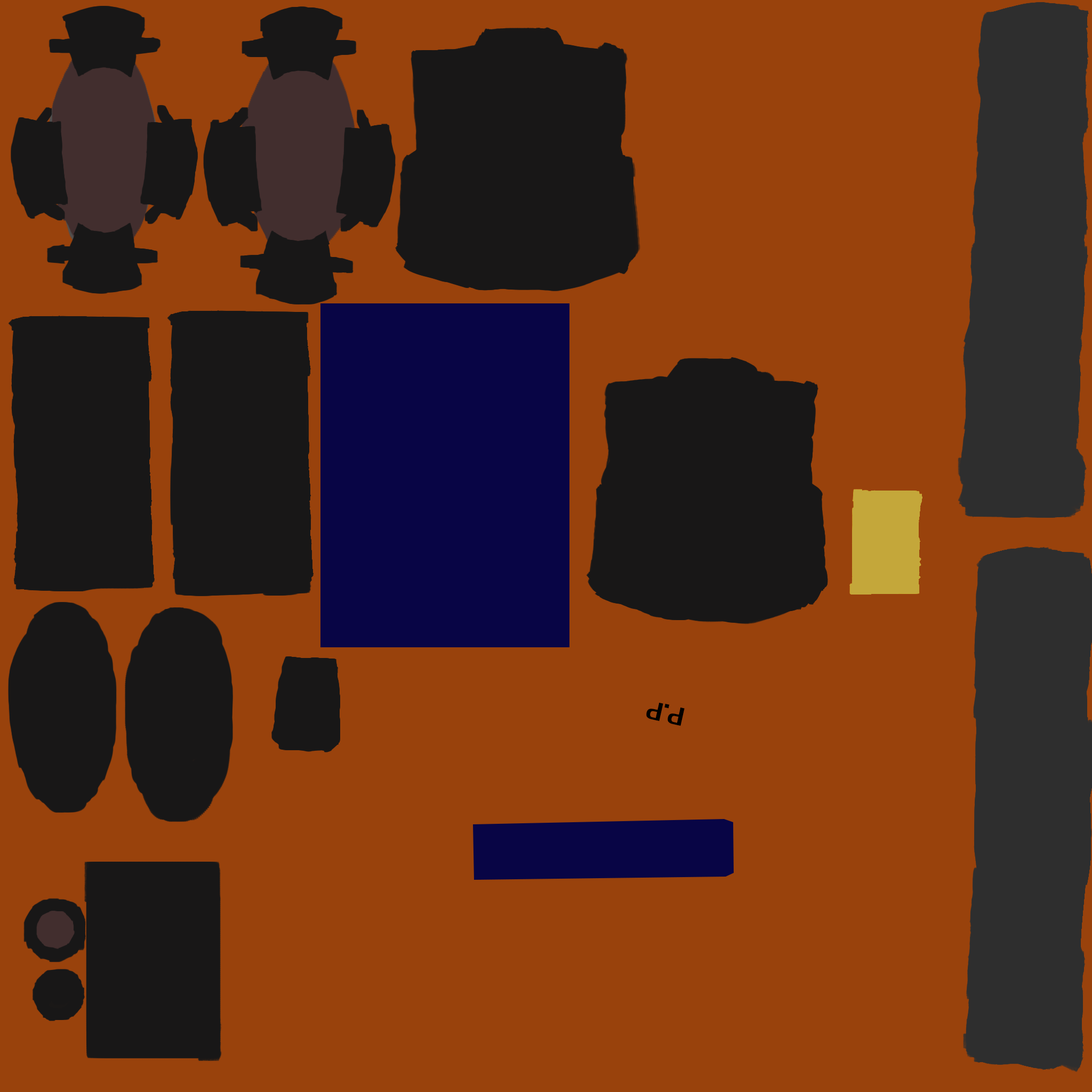
<style>
.page{position:relative;width:1092px;height:1092px;background:#99420c}
.page>*{position:absolute;margin:0}
.t1{font:38.4px "LilyUPC";color:#000000}
</style>
<div class="page">
<p class="t1" style="left:646px;top:702px;width:39px;height:24px;rotate:-167deg">P.P</p>
</div>
